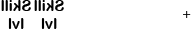
<style>
.page{position:relative;width:192px;height:32px;background:#ffffff}
.page>*{position:absolute;margin:0}
.t1{font:15px "ArialRoundedMTBold";color:#000000}
</style>
<div class="page">
<p class="t1" style="left:1px;top:0px;width:30px;height:29px;text-align:center;rotate:180deg">Skill<br>lvl</p>
<p class="t1" style="left:34px;top:0px;width:30px;height:29px;rotate:180deg">Skilllvl</p>
</div>
